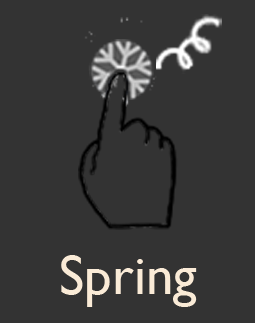
<style>
.page{position:relative;width:255px;height:323px;background:#333333}
.page>*{position:absolute;margin:0}
.t1{font:55px "GillSansMT";color:#faebd7}
</style>
<div class="page">
<p class="t1" style="left:61px;top:255px;width:136px;height:52px">Spring</p>
</div>
